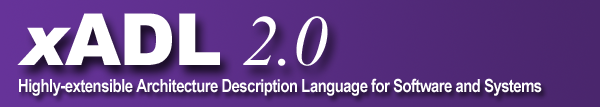
<style>
.page{position:relative;width:600px;height:107px}
.page>*{position:absolute;margin:0}
.t1{font:72px "Arial-Black";letter-spacing:-0.025em;color:#ffffff}
.t2{font:72px "Arial-BlackItalic";letter-spacing:-0.025em;color:#ffffff}
.t3{font:72px "TimesNewRomanPS-ItalicMT";letter-spacing:-0.025em;color:#ffffff}
.t4{font:18px "ArialNarrow-Bold";letter-spacing:-0.025em;color:#ffffff}
</style>
<div class="page">
<p class="t1" style="left:17px;top:13px;width:311px;height:53px"><span class="t2">x</span>ADL <span class="t3">2.0</span></p>
<p class="t4" style="left:19px;top:78px;width:523px;height:18px">Highly-extensible Architecture Description Language for Software and Systems</p>
</div>
